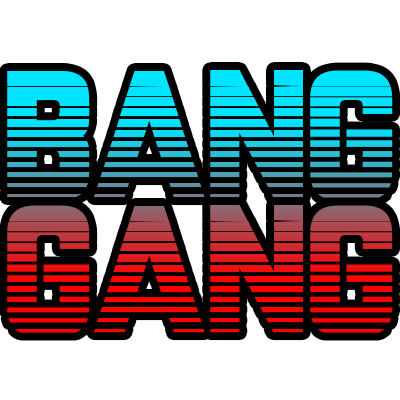
<style>
.page{position:relative;width:400px;height:400px;background:#ffffff}
.page>*{position:absolute;margin:0}
.t1{font:171px/135px "Championship"}
</style>
<div class="page">
<p class="t1" style="left:7px;top:70px;width:386px;height:263px;text-align:center">BANG<br>GANG</p>
</div>
